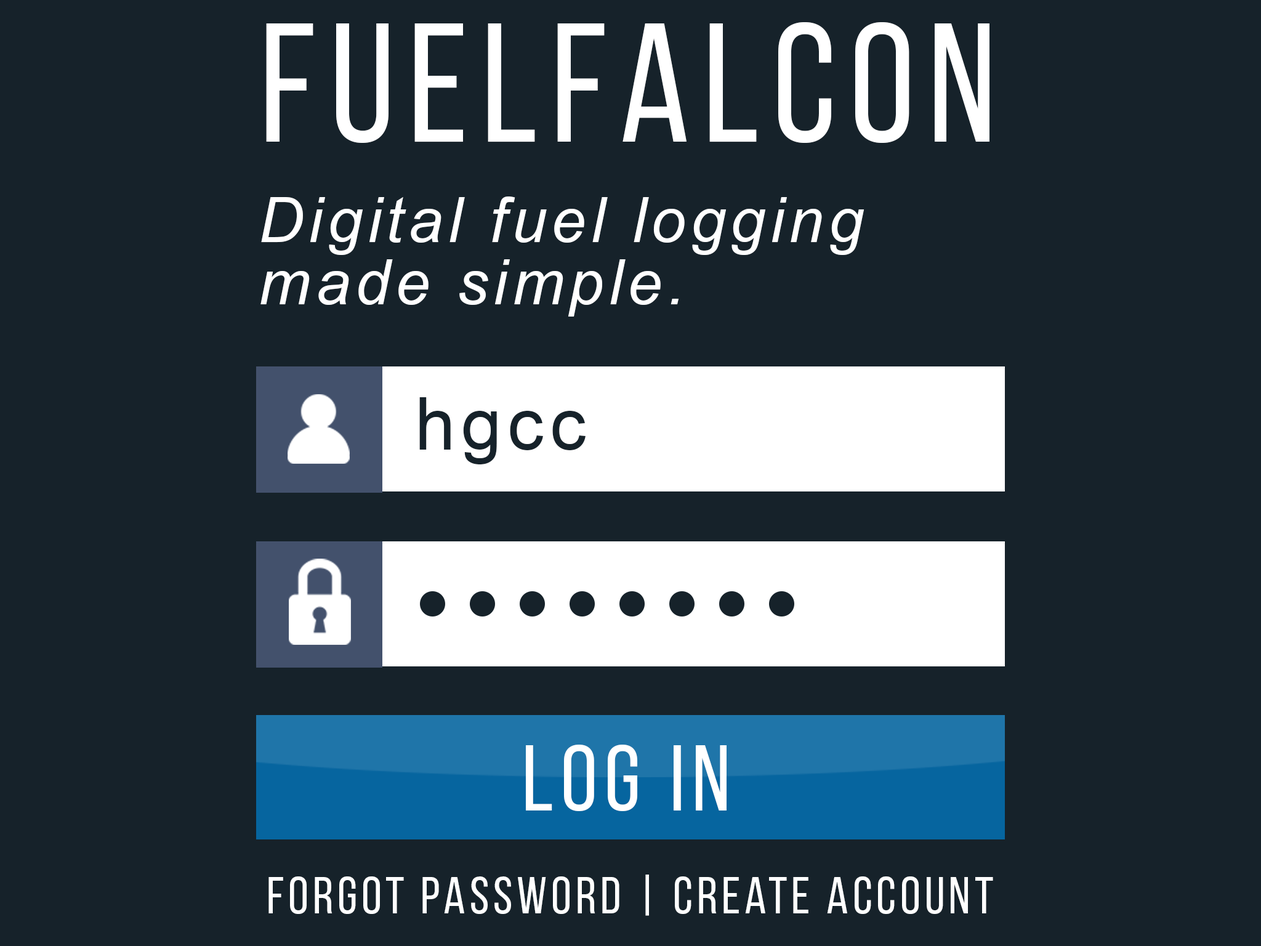
<style>
.page{position:relative;width:1261px;height:946px;background:#16222a}
.page>*{position:absolute;margin:0}
.t1{font:168.5px "BebasNeueRegular";letter-spacing:0.08em;color:#ffffff}
.t2{font:62.4px/62.4px "Arial-ItalicMT";letter-spacing:0.08em;color:#ffffff}
.t3{font:72.8px "ArialMT";letter-spacing:0.08em;color:#16222a}
.t4{font:93.4px "BebasNeueRegular";letter-spacing:0.08em;color:#ffffff}
.t5{font:52px "BebasNeueRegular";letter-spacing:0.08em;color:#ffffff}
</style>
<div class="page">
<p class="t1" style="left:266px;top:22px;width:723px;height:121px">fuelfalcon</p>
<p class="t2" style="left:260px;top:196px;width:604px;height:120px;text-align:right">Digital fuel logging<br>made simple.</p>
<p class="t3" style="left:419px;top:397px;width:167px;height:67px">hgcc</p>
<p class="t4" style="left:526px;top:744px;width:201px;height:67px">log in</p>
<p class="t5" style="left:268px;top:874px;width:725px;height:42px">forgot password | create account</p>
</div>
